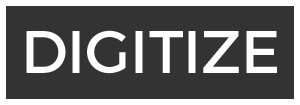
<style>
.page{position:relative;width:300px;height:105px;background:#333333}
.page>*{position:absolute;margin:0}
.t1{font:60px "Montserrat-Regular";color:#ffffff;text-transform:uppercase}
</style>
<div class="page">
<p class="t1" style="left:26px;top:30px;width:251px;height:44px">DIGITIZE</p>
</div>
